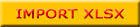
<style>
.page{position:relative;width:140px;height:27px;background:#ffc501}
.page>*{position:absolute;margin:0}
.t1{font:12.8px "Verdana";font-weight:bold;scale:1.18 1}
</style>
<div class="page">
<p class="t1" style="left:16px;top:9px;width:108px;height:10px">IMPORT XLSX</p>
</div>
